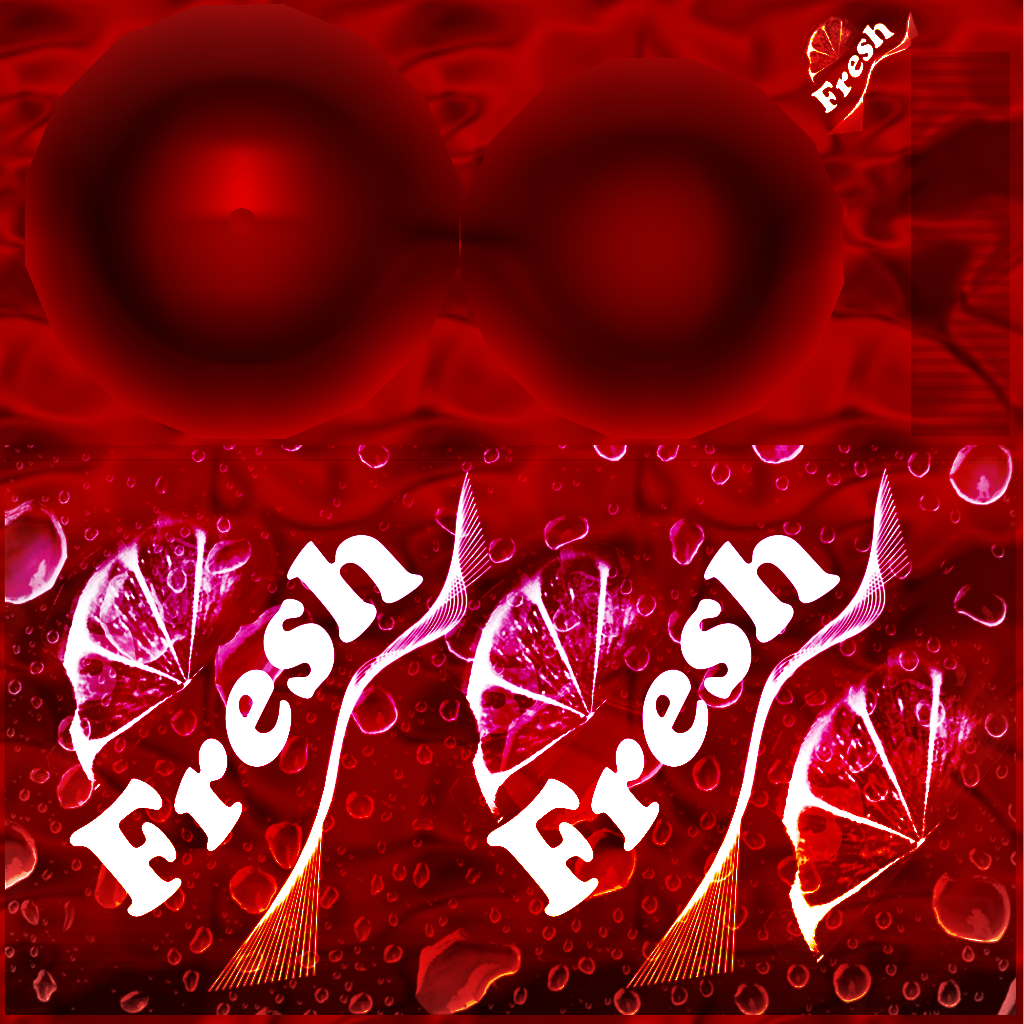
<style>
.page{position:relative;width:1024px;height:1024px}
.page>*{position:absolute;margin:0}
.t1{font:36.9px "CooperBlack";color:#ffffff}
.t2{font:156.4px "CooperBlack";color:#ffffff}
</style>
<div class="page">
<p class="t1" style="left:811px;top:23px;width:84px;height:91px;rotate:-49deg">Fresh</p>
<p class="t2" style="left:69px;top:534px;width:355px;height:383px;rotate:-49deg">Fresh</p>
<p class="t2" style="left:486px;top:534px;width:355px;height:383px;rotate:-49deg">Fresh</p>
</div>
